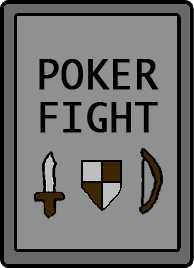
<style>
.page{position:relative;width:194px;height:268px;background:#909090}
.page>*{position:absolute;margin:0}
.t1{font:39px "Monaco";color:#000000;font-weight:bold}
</style>
<div class="page">
<p class="t1" style="left:39px;top:59px;width:120px;height:74px;text-align:center">POKER<br>FIGHT</p>
</div>
